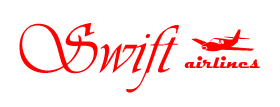
<style>
.page{position:relative;width:280px;height:107px;background:#ffffff}
.page>*{position:absolute;margin:0}
.t1{font:72px "Vivaldii";color:#ff0000}
.t2{font:18px "Magneto-Bold";color:#ff0000}
</style>
<div class="page">
<p class="t1" style="left:19px;top:22px;width:160px;height:71px">Swift</p>
<p class="t2" style="left:184px;top:56px;width:77px;height:12px">airlines</p>
</div>
